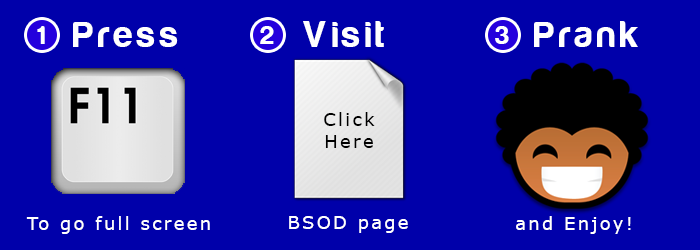
<style>
.page{position:relative;width:700px;height:250px;background:#0000aa}
.page>*{position:absolute;margin:0}
.t1{font:27px "Harabara";letter-spacing:0.125em;color:#ffffff}
.t2{font:37.8px "Harabara";letter-spacing:0.125em;color:#ffffff}
.t3{font:18px "Verdana";letter-spacing:0.125em;color:#000000}
.t4{font:18px "Verdana";letter-spacing:0.125em;color:#ffffff}
</style>
<div class="page">
<p class="t1" style="left:37px;top:26px;width:8px;height:18px">1</p>
<p class="t2" style="left:73px;top:22px;width:105px;height:25px">Press</p>
<p class="t1" style="left:260px;top:26px;width:14px;height:18px">2</p>
<p class="t2" style="left:303px;top:21px;width:81px;height:26px">Visit</p>
<p class="t1" style="left:495px;top:26px;width:14px;height:18px">3</p>
<p class="t2" style="left:534px;top:21px;width:104px;height:26px">Prank</p>
<p class="t3" style="left:324px;top:112px;width:51px;height:36px;text-align:center">Click<br>Here</p>
<p class="t4" style="left:26px;top:216px;width:184px;height:18px">To go full screen</p>
<p class="t4" style="left:289px;top:216px;width:119px;height:17px">BSOD page</p>
<p class="t4" style="left:516px;top:216px;width:115px;height:18px">and Enjoy!</p>
</div>
